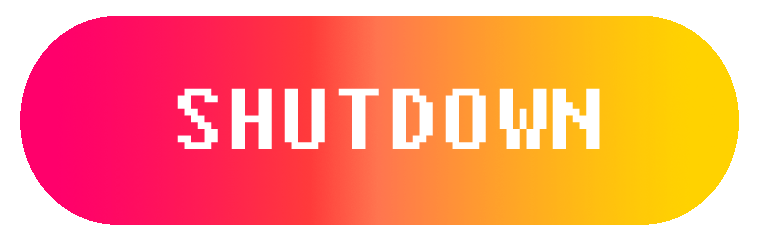
<style>
.page{position:relative;width:759px;height:241px;background:#ffffff}
.page>*{position:absolute;margin:0}
.t1{font:85.7px "Fixedsys";color:#ffffff}
</style>
<div class="page">
<p class="t1" style="left:177px;top:88px;width:423px;height:61px">SHUTDOWN</p>
</div>
